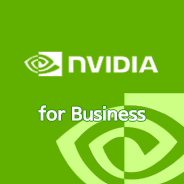
<style>
.page{position:relative;width:184px;height:184px;background:#61b000}
.page>*{position:absolute;margin:0}
.t1{font:20px "THELuxGoEB_U";letter-spacing:-0.025em;color:#ffffff}
</style>
<div class="page">
<p class="t1" style="left:38px;top:105px;width:108px;height:16px">for Business</p>
</div>
